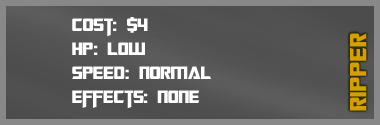
<style>
.page{position:relative;width:380px;height:125px}
.page>*{position:absolute;margin:0}
.t1{font:20px "TransformersMovie";color:#ffffff}
.t2{font:20px "TransformersMovie";letter-spacing:0.04em;color:#ffffff}
.t3{font:26px "TransformersMovie";letter-spacing:0.04em;color:#d49f00}
</style>
<div class="page">
<p class="t1" style="left:72px;top:17px;width:139px;height:92px">Cost: $4<br>h<span class="t2">p</span>: low<br>Spee<span class="t2">d</span>: normal<br>effects: none</p>
<p class="t3" style="left:350px;top:33px;width:17px;height:78px;rotate:-90deg">ripper</p>
</div>
